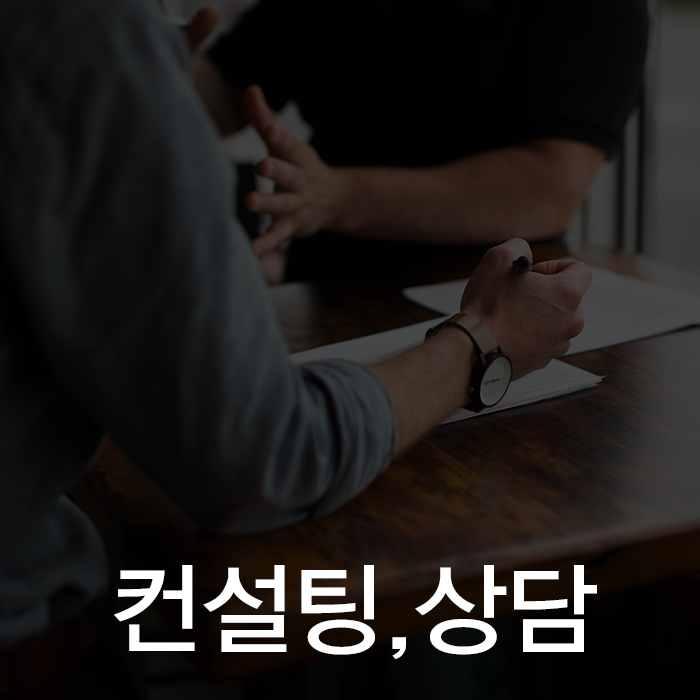
<style>
.page{position:relative;width:700px;height:700px}
.page>*{position:absolute;margin:0}
.t1{font:100px "YDIYGO330";color:#ffffff}
</style>
<div class="page">
<p class="t1" style="left:114px;top:565px;width:483px;height:94px">컨설팅,상담</p>
</div>
